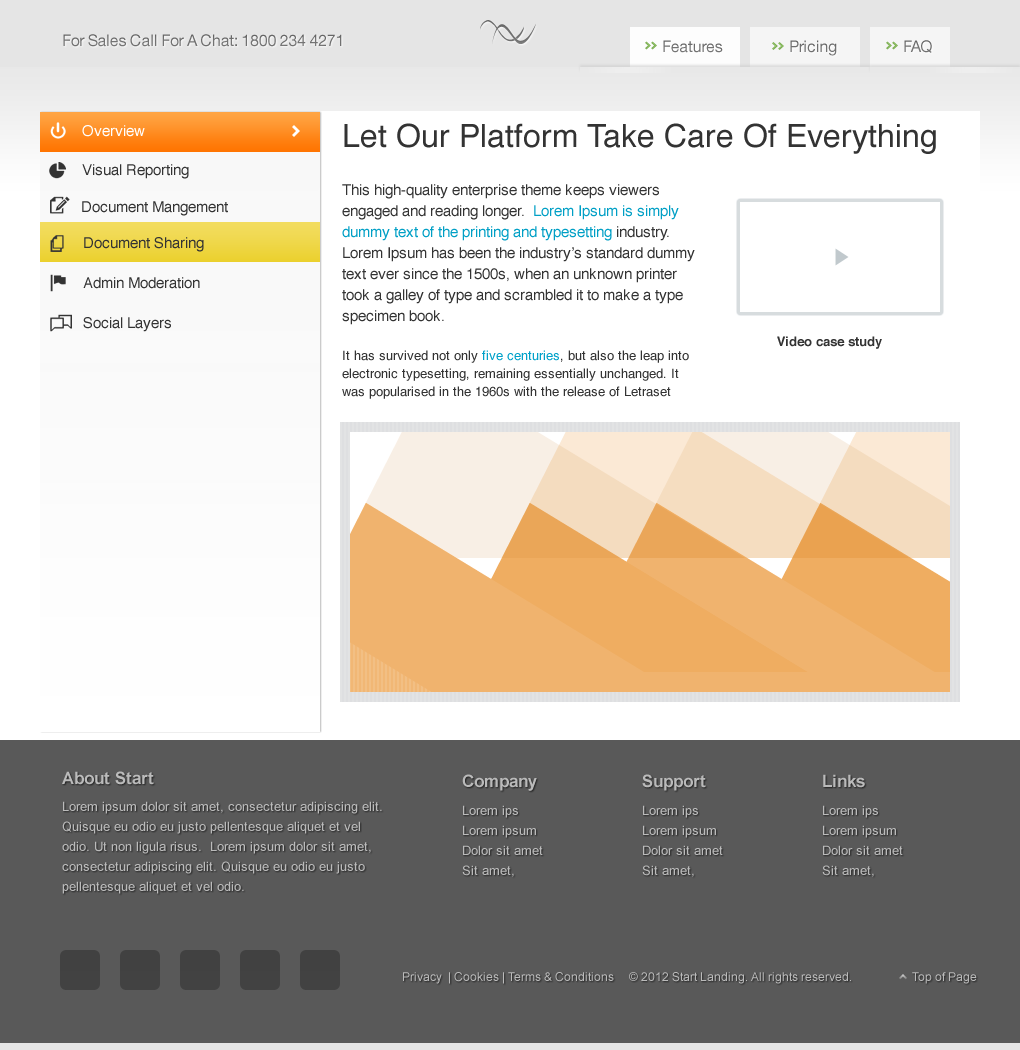
<style>
.page{position:relative;width:1020px;height:1050px;background:#ffffff}
.page>*{position:absolute;margin:0}
.t1{font:16px "HelveticaNeue-Roman";letter-spacing:-0.02em;color:#717171}
.t2{font:16px "HelveticaNeue-Roman";letter-spacing:-0.02em;color:#737373}
.t3{font:16px "HelveticaNeue-Roman";letter-spacing:-0.02em;color:#707070}
.t4{font:15px "Helvetica";color:#ffffff}
.t5{font:32px "Helvetica";color:#333333}
.t6{font:15px "Helvetica";color:#333333}
.t7{font:15px/21px "Helvetica";color:#333333}
.t8{font:15px/21px "Helvetica";color:#009fc5}
.t9{font:13px/18.2px "Helvetica";color:#333333}
.t10{font:13px/18.2px "Helvetica";color:#00a1c9}
.t11{font:13px "Helvetica-Bold";color:#333333}
.t12{font:17px "Arial-BoldMT";color:#bbbbbb}
.t13{font:17px "Arial-BoldMT";color:#bababa}
.t14{font:13px/20px "ArialMT";color:#bbbbbb}
.t15{font:13px "ArialMT";color:#bbbbbb}
.t16{font:12px "ArialMT";color:#bbbbbb}
</style>
<div class="page">
<p class="t1" style="left:63px;top:34px;width:279px;height:13px">For Sales Call For A Chat: 1800 234 4271</p>
<p class="t2" style="left:663px;top:40px;width:60px;height:13px">Features</p>
<p class="t3" style="left:790px;top:40px;width:47px;height:16px">Pricing</p>
<p class="t1" style="left:904px;top:40px;width:28px;height:13px">FAQ</p>
<p class="t4" style="left:82px;top:125px;width:63px;height:12px">Overview</p>
<p class="t5" style="left:344px;top:123px;width:592px;height:31px">Let Our Platform Take Care Of Everything</p>
<p class="t6" style="left:82px;top:164px;width:107px;height:15px">Visual Reporting</p>
<p class="t7" style="left:342px;top:184px;width:353px;height:215px">This high-quality enterprise theme keeps viewers engaged and reading longer.  <span class="t8">Lorem Ipsum is simply dummy text of the printing and typesetting </span>industry. Lorem Ipsum has been the industry’s standard dummy text ever since the 1500s, when an unknown printer took a galley of type and scrambled it to make a type specimen book. <br><br><span class="t9">It has survived not only </span><span class="t10">five centuries</span><span class="t9">, but also the leap into electronic typesetting, remaining essentially unchanged. It was popularised in the 1960s with the release of Letraset</span></p>
<p class="t6" style="left:82px;top:201px;width:146px;height:15px">Document Mangement</p>
<p class="t6" style="left:84px;top:237px;width:120px;height:15px">Document Sharing</p>
<p class="t6" style="left:83px;top:277px;width:117px;height:12px">Admin Moderation</p>
<p class="t6" style="left:83px;top:317px;width:88px;height:15px">Social Layers</p>
<p class="t11" style="left:777px;top:336px;width:105px;height:13px">Video case study</p>
<p class="t12" style="left:62px;top:771px;width:92px;height:14px">About Start</p>
<p class="t13" style="left:462px;top:774px;width:75px;height:17px">Company</p>
<p class="t13" style="left:642px;top:774px;width:64px;height:17px">Support</p>
<p class="t13" style="left:823px;top:774px;width:42px;height:14px">Links</p>
<p class="t14" style="left:62px;top:801px;width:320px;height:93px">Lorem ipsum dolor sit amet, consectetur adipiscing elit. Quisque eu odio eu justo pellentesque aliquet et vel odio. Ut non ligula risus.  Lorem ipsum dolor sit amet, consectetur adipiscing elit. Quisque eu odio eu justo pellentesque aliquet et vel odio.</p>
<p class="t15" style="left:463px;top:805px;width:55px;height:13px">Lorem ips</p>
<p class="t15" style="left:643px;top:805px;width:55px;height:13px">Lorem ips</p>
<p class="t15" style="left:823px;top:805px;width:55px;height:13px">Lorem ips</p>
<p class="t15" style="left:463px;top:825px;width:73px;height:13px">Lorem ipsum</p>
<p class="t15" style="left:643px;top:825px;width:73px;height:13px">Lorem ipsum</p>
<p class="t15" style="left:823px;top:825px;width:73px;height:13px">Lorem ipsum</p>
<p class="t15" style="left:463px;top:845px;width:80px;height:10px">Dolor sit amet</p>
<p class="t15" style="left:643px;top:845px;width:80px;height:10px">Dolor sit amet</p>
<p class="t15" style="left:823px;top:845px;width:80px;height:10px">Dolor sit amet</p>
<p class="t15" style="left:462px;top:865px;width:52px;height:12px">Sit amet,</p>
<p class="t15" style="left:642px;top:865px;width:52px;height:12px">Sit amet,</p>
<p class="t15" style="left:822px;top:865px;width:52px;height:12px">Sit amet,</p>
<p class="t16" style="left:403px;top:972px;width:448px;height:12px">Privacy  | Cookies | Terms &amp; Conditions  © 2012 Start Landing. All rights reserved.</p>
<p class="t16" style="left:912px;top:972px;width:65px;height:12px">Top of Page</p>
</div>
